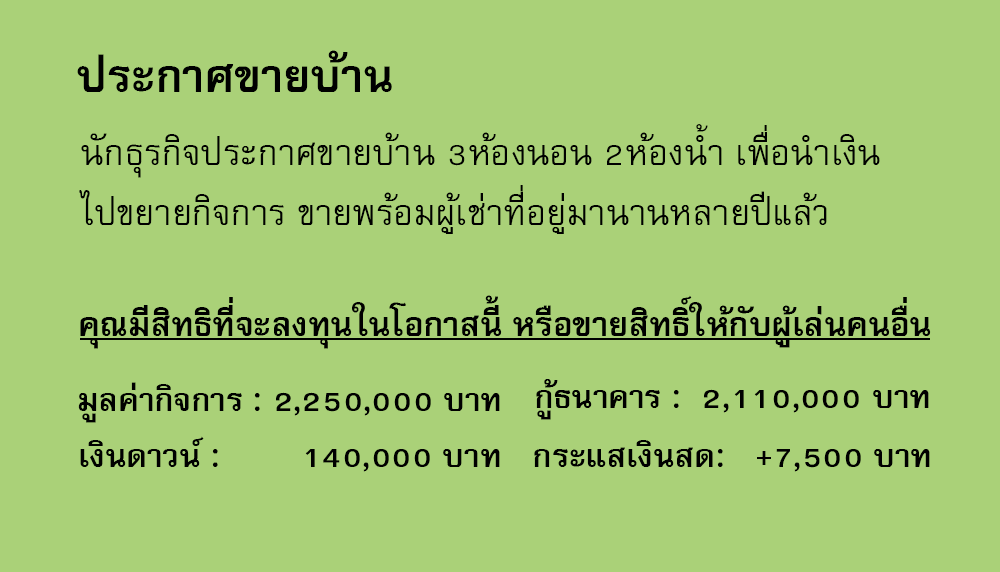
<style>
.page{position:relative;width:1000px;height:572px;background:#aad178}
.page>*{position:absolute;margin:0}
.t1{font:64px "FreesiaUPCBold";color:#000000}
.t2{font:50px/60px "FreesiaUPC";color:#000000}
.t3{font:47px "FreesiaUPCBold";color:#000000}
.t4{font:45px "FreesiaUPCBold";color:#000000}
</style>
<div class="page">
<p class="t1" style="left:77px;top:50px;width:315px;height:42px">ประกาศขายบ้าน</p>
<p class="t2" style="left:79px;top:124px;width:801px;height:110px">นักธุรกิจประกาศขายบ้าน 3ห้องนอน 2ห้องน้ำ เพื่อนำเงิน<br>ไปขยายกิจการ ขายพร้อมผู้เช่าที่อยู่มานานหลายปีแล้ว</p>
<p class="t3" style="left:80px;top:295px;width:851px;height:54px">คุณมีสิทธิที่จะลงทุนในโอกาสนี้ หรือขายสิทธิ์ให้กับผู้เล่นคนอื่น</p>
<p class="t4" style="left:78px;top:382px;width:422px;height:41px">มูลค่ากิจการ : 2,250,000 บาท</p>
<p class="t4" style="left:536px;top:379px;width:393px;height:41px">กู้ธนาคาร :  2,110,000 บาท</p>
<p class="t4" style="left:80px;top:436px;width:420px;height:36px">เงินดาวน์ :        140,000 บาท</p>
<p class="t4" style="left:534px;top:440px;width:396px;height:32px">กระแสเงินสด:   +7,500 บาท</p>
</div>
